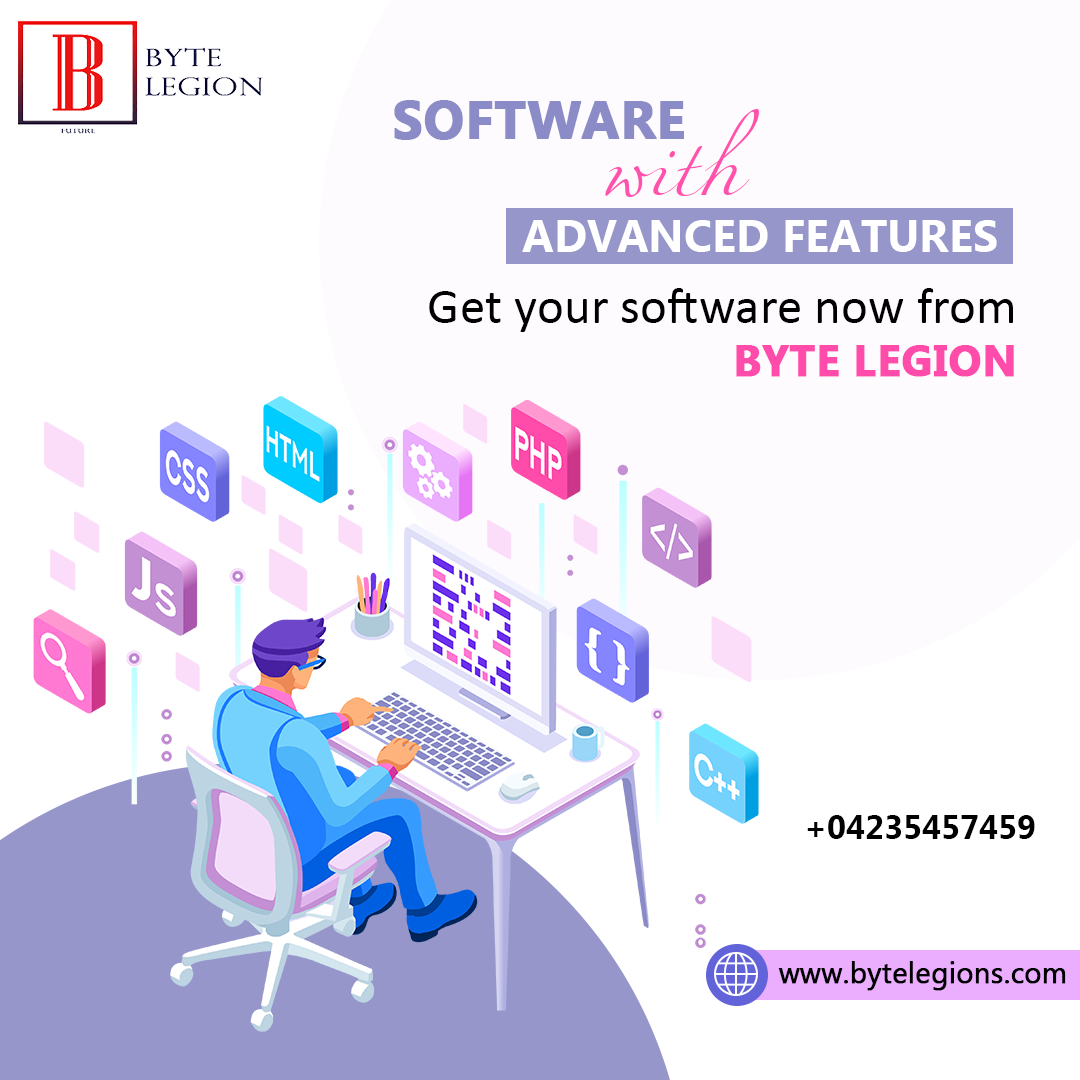
<style>
.page{position:relative;width:1080px;height:1080px;background:#ffffff}
.page>*{position:absolute;margin:0}
.t1{font:53px "MyanmarText-Bold";color:#8b8bc7;text-transform:uppercase;font-weight:bold}
.t2{font:120.3px "Miama";color:#ff52ad}
.t3{font:45px "MyanmarText-Bold";color:#ffffff;text-transform:uppercase}
.t4{font:51.4px/53px "Calibri";color:#000000}
.t5{font:43.4px/53px "MyanmarText-Bold";color:#ff4baa;text-transform:uppercase;font-weight:bold}
.t6{font:33px "MyanmarText-Bold";color:#000000}
.t7{font:28.5px "MyanmarText";color:#000000;font-weight:bold}
</style>
<div class="page">
<p class="t1" style="left:394px;top:100px;width:290px;height:40px">Software</p>
<p class="t2" style="left:605px;top:109px;width:154px;height:88px">with</p>
<p class="t3" style="left:522px;top:220px;width:475px;height:32px">Advanced Features</p>
<p class="t4" style="left:429px;top:288px;width:585px;height:89px;text-align:right">Get your software now from<br><span class="t5">Byte Legion</span></p>
<p class="t6" style="left:807px;top:815px;width:228px;height:24px">+04235457459</p>
<p class="t7" style="left:778px;top:961px;width:288px;height:30px">www.bytelegions.com</p>
</div>
